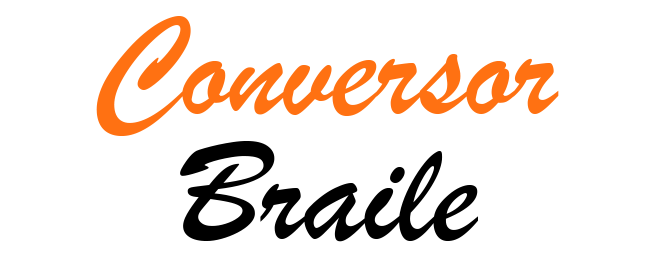
<style>
.page{position:relative;width:650px;height:256px;background:#ffffff}
.page>*{position:absolute;margin:0}
.t1{font:150px "BrushScriptMT";color:#ff7112}
.t2{font:150px "BrushScriptMT";color:#000000}
</style>
<div class="page">
<p class="t1" style="left:96px;top:16px;width:463px;height:120px">Conversor</p>
<p class="t2" style="left:180px;top:141px;width:298px;height:101px">Braile</p>
</div>
